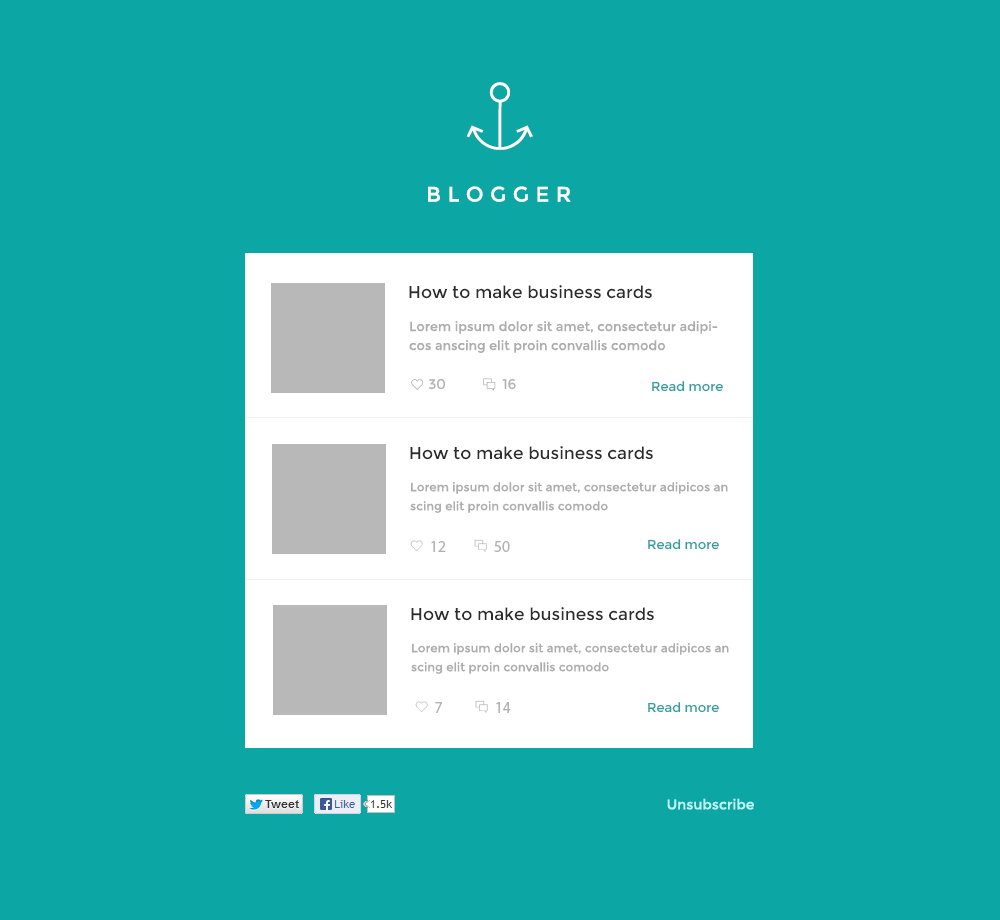
<style>
.page{position:relative;width:1000px;height:920px;background:#0ca6a4}
.page>*{position:absolute;margin:0}
.t1{font:21px "Montserrat-Regular";letter-spacing:0.32em;color:#ffffff}
.t2{font:17px "Montserrat-Regular";color:#2c2c2c}
.t3{font:13px/19px "Montserrat-Regular";color:#adadad}
.t4{font:14px "Montserrat-Regular";color:#b2b2b2}
.t5{font:13px "Montserrat-Regular";color:#319e9d}
.t6{font:12px/19px "Montserrat-Regular";color:#adadad}
.t7{font:13px "Montserrat-Regular";color:#319f9e}
.t8{font:14px "Montserrat-Regular";color:#baf8f8}
</style>
<div class="page">
<p class="t1" style="left:428px;top:186px;width:143px;height:16px">BLOGGER</p>
<p class="t2" style="left:409px;top:285px;width:243px;height:14px">How to make business cards</p>
<p class="t3" style="left:409px;top:321px;width:309px;height:32px">Lorem ipsum dolor sit amet, consectetur adipicos anscing elit proin convallis comodo</p>
<p class="t4" style="left:428px;top:378px;width:18px;height:12px">30</p>
<p class="t4" style="left:502px;top:378px;width:14px;height:12px">16</p>
<p class="t5" style="left:652px;top:381px;width:71px;height:11px">Read more</p>
<p class="t2" style="left:410px;top:446px;width:243px;height:14px">How to make business cards</p>
<p class="t6" style="left:410px;top:482px;width:318px;height:31px">Lorem ipsum dolor sit amet, consectetur adipicos an<br>scing elit proin convallis comodo</p>
<p class="t5" style="left:648px;top:539px;width:71px;height:11px">Read more</p>
<p class="t2" style="left:411px;top:607px;width:243px;height:14px">How to make business cards</p>
<p class="t6" style="left:411px;top:643px;width:318px;height:31px">Lorem ipsum dolor sit amet, consectetur adipicos an<br>scing elit proin convallis comodo</p>
<p class="t7" style="left:648px;top:702px;width:71px;height:11px">Read more</p>
<p class="t8" style="left:667px;top:798px;width:87px;height:12px">Unsubscribe</p>
</div>
